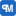
<style>
.page{position:relative;width:16px;height:16px;background:#1b66c3}
.page>*{position:absolute;margin:0}
.t1{font:10px "Arial-BoldMT";letter-spacing:-0.06em;color:#ffffff;scale:0.94 1}
</style>
<div class="page">
<p class="t1" style="left:2px;top:4px;width:5px;height:8px;rotate:180deg">P</p>
<p class="t1" style="left:6px;top:4px;width:7px;height:8px">M</p>
</div>
